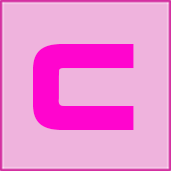
<style>
.page{position:relative;width:171px;height:171px;background:#efb3dd}
.page>*{position:absolute;margin:0}
.t1{font:121px "Coalition";color:#ff05ce}
</style>
<div class="page">
<p class="t1" style="left:33px;top:44px;width:101px;height:86px">c</p>
</div>
